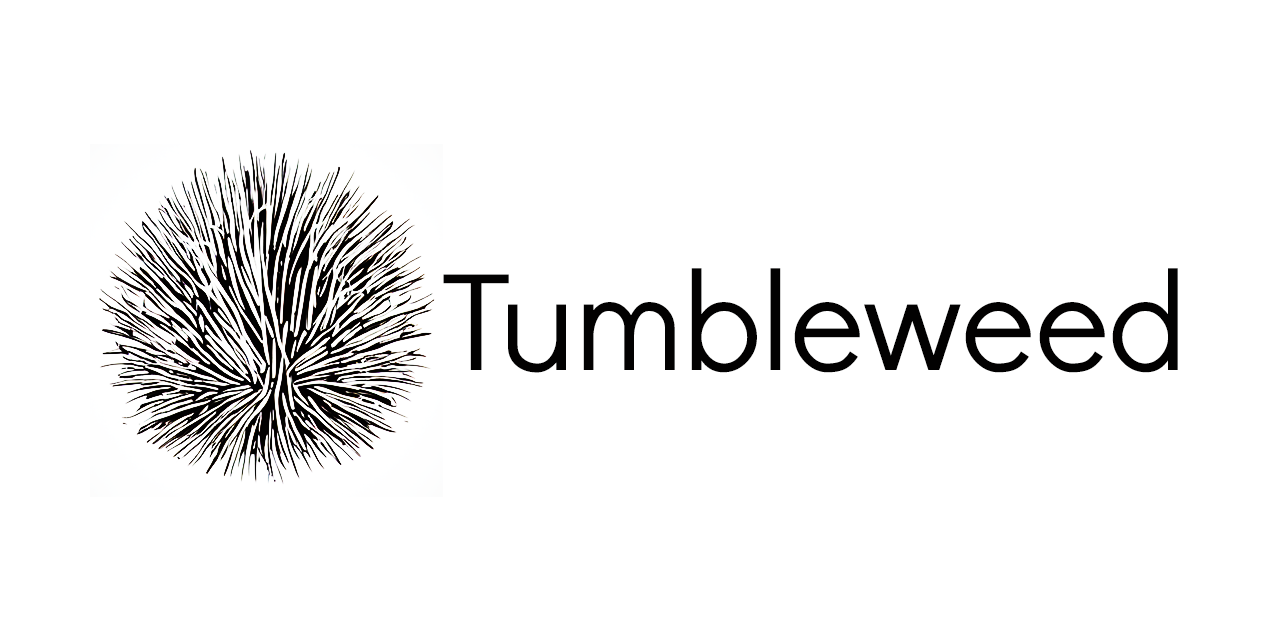
<style>
.page{position:relative;width:1280px;height:640px;background:#ffffff}
.page>*{position:absolute;margin:0}
.t1{font:140px "DidactGothic";color:#020101}
</style>
<div class="page">
<p class="t1" style="left:443px;top:268px;width:735px;height:105px">Tumbleweed</p>
</div>
